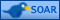
<style>
.page{position:relative;width:60px;height:20px;background:#92c2fc}
.page>*{position:absolute;margin:0}
.t1{font:11px "LucidaConsole";color:#0255bb}
</style>
<div class="page">
<p class="t1" style="left:31px;top:5px;width:26px;height:9px">SOAR</p>
</div>
